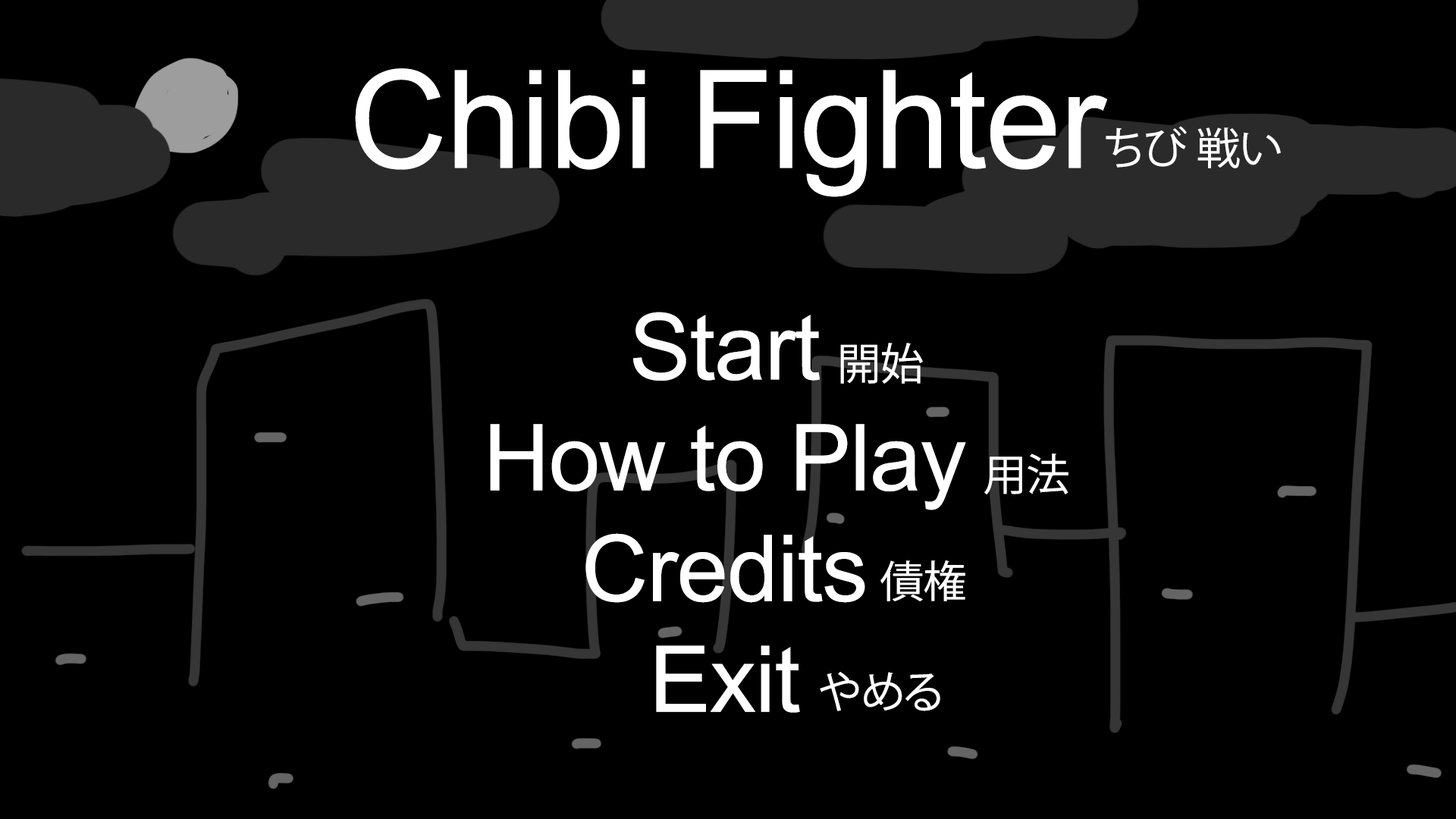
<style>
.page{position:relative;width:1456px;height:819px;background:#000000}
.page>*{position:absolute;margin:0}
.t1{font:136.3px "ArialMT";letter-spacing:-0.01em;color:#ffffff}
.t2{font:43.5px "KozGoPr6N-Regular";letter-spacing:-0.01em;color:#ffffff}
.t3{font:92.3px "ArialMT";letter-spacing:-0.01em;color:#ffffff}
</style>
<div class="page">
<p class="t1" style="left:355px;top:68px;width:752px;height:129px">Chibi Fighter</p>
<p class="t2" style="left:1106px;top:126px;width:175px;height:42px">ちび 戦い</p>
<p class="t3" style="left:490px;top:312px;width:476px;height:401px;text-align:center">Start<br>How to Play<br>Credits<br>Exit</p>
<p class="t2" style="left:840px;top:343px;width:83px;height:41px">開始</p>
<p class="t2" style="left:984px;top:453px;width:84px;height:41px">用法</p>
<p class="t2" style="left:880px;top:560px;width:85px;height:41px">債権</p>
<p class="t2" style="left:820px;top:672px;width:120px;height:39px">やめる</p>
</div>
